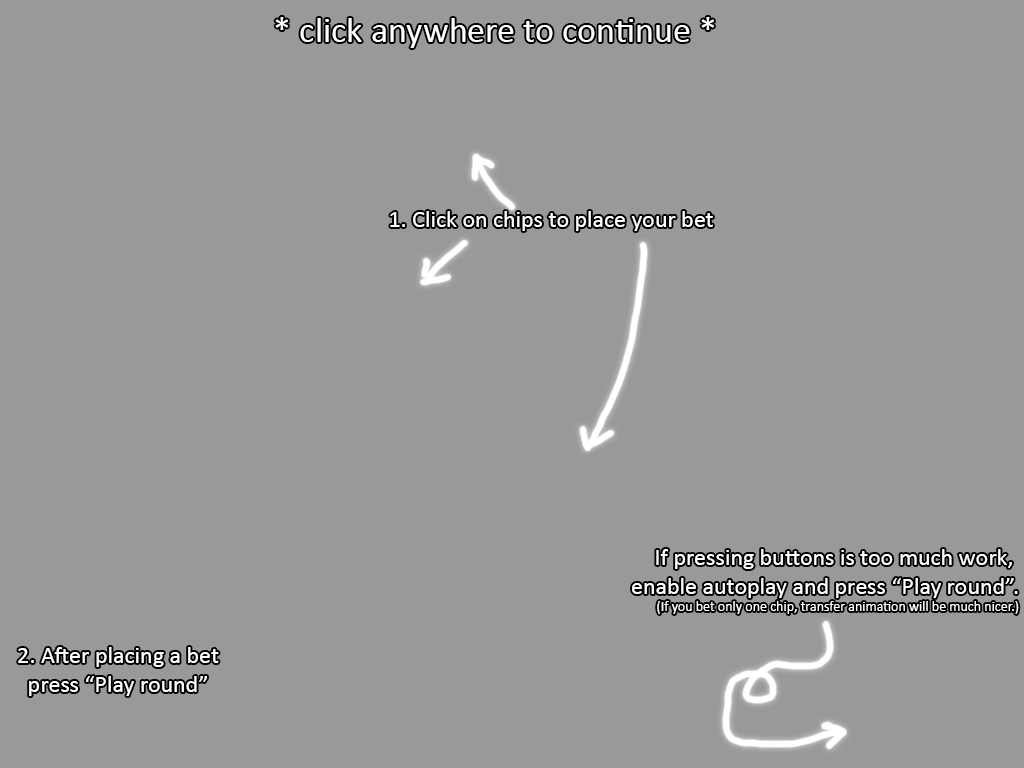
<style>
.page{position:relative;width:1024px;height:768px;background:#999999}
.page>*{position:absolute;margin:0}
.t1{font:36px "Calibri";color:#ffffff}
.t2{font:24px "Calibri";color:#ffffff}
.t3{font:14px "Calibri";color:#ffffff}
</style>
<div class="page">
<p class="t1" style="left:275px;top:17px;width:439px;height:31px">* click anywhere to continue *</p>
<p class="t2" style="left:390px;top:211px;width:323px;height:20px">1. Click on chips to place your bet</p>
<p class="t2" style="left:632px;top:549px;width:387px;height:65px;text-align:right">If pressing buttons is too much work, <br>enable autoplay and press “Play round”.<br><span class="t3">(If you bet only one chip, transfer animation will be much nicer.)</span></p>
<p class="t2" style="left:18px;top:647px;width:201px;height:49px;text-align:center">2. After placing a bet<br>press “Play round”</p>
</div>
